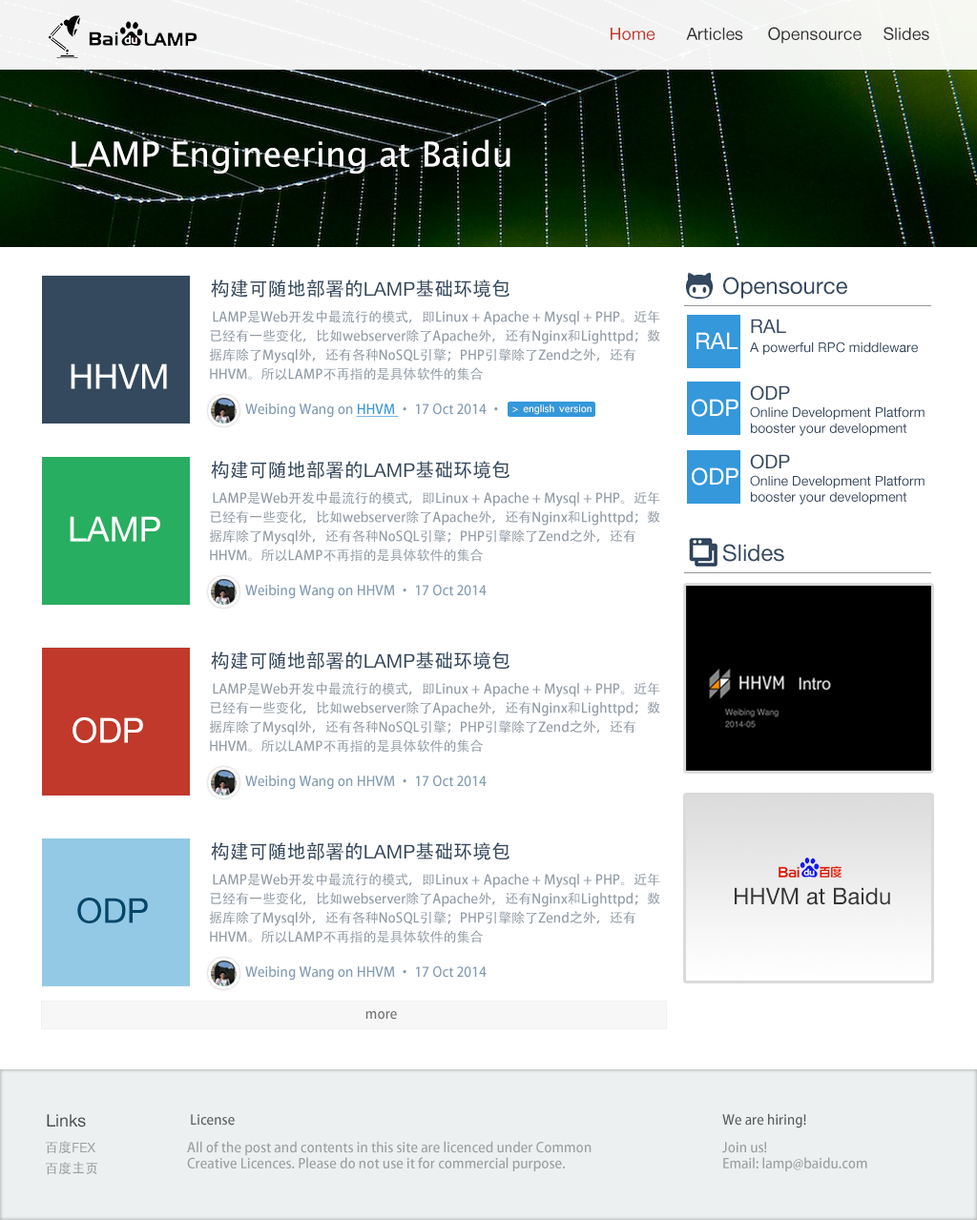
<style>
.page{position:relative;width:977px;height:1220px;background:#ffffff}
.page>*{position:absolute;margin:0}
.t1{font:17.2px "HelveticaNeue";color:#c0392b}
.t2{font:17.2px "HelveticaNeue";color:#313131}
.t3{font:34.4px "LucidaGrande";color:#ffffff}
.t4{font:19.1px "AdobeHeitiStd-Regular";color:#34495e}
.t5{font:19.1px "HelveticaNeue";color:#34495e}
.t6{font:22.9px "HelveticaNeue";color:#344860}
.t7{font:13.4px/19.1px "AdobeHeitiStd-Regular";color:#929ca6}
.t8{font:19.1px "HelveticaNeue";color:#344860}
.t9{font:22.9px "HelveticaNeue";color:#ffffff}
.t10{font:13.4px "HelveticaNeue";color:#344860}
.t11{font:34.4px "HelveticaNeue";color:#ffffff}
.t12{font:13.4px "AdobeHeitiStd-Regular";color:#839cb5}
.t13{font:13.4px "AdobeHeitiStd-Regular";color:#3498db;text-decoration:underline}
.t14{font:13.4px "AppleSymbols";color:#ffffff}
.t15{font:22.9px "HelveticaNeue";color:#363636}
.t16{font:34.4px "HelveticaNeue";color:#004669}
.t17{font:13.4px "AdobeHeitiStd-Regular";color:#727272}
.t18{font:17.2px "HelveticaNeue";color:#474747}
.t19{font:13.4px "AdobeHeitiStd-Regular";color:#5e5e5e}
.t20{font:13.4px "HelveticaNeue";color:#9f9f9f}
.t21{font:13.4px "AdobeHeitiStd-Regular";color:#9f9f9f}
</style>
<div class="page">
<p class="t1" style="left:611px;top:28px;width:45px;height:12px">Home</p>
<p class="t2" style="left:686px;top:28px;width:57px;height:12px">Articles</p>
<p class="t2" style="left:768px;top:27px;width:94px;height:17px">Opensource</p>
<p class="t2" style="left:884px;top:27px;width:45px;height:13px">Slides</p>
<p class="t3" style="left:72px;top:139px;width:438px;height:35px">LAMP Engineering at Baidu</p>
<p class="t4" style="left:211px;top:280px;width:299px;height:18px">构建可随地部署的<span class="t5">LAMP</span>基础环境包</p>
<p class="t6" style="left:723px;top:277px;width:124px;height:22px">Opensource</p>
<p class="t7" style="left:209px;top:310px;width:451px;height:71px">LAMP是Web开发中最流行的模式，即Linux + Apache + Mysql + PHP。近年已经有一些变化，比如webserver除了Apache外，还有Nginx和Lighttpd；数据库除了Mysql外，还有各种NoSQL引擎；PHP引擎除了Zend之外，还有HHVM。所以LAMP不再指的是具体软件的集合</p>
<p class="t8" style="left:751px;top:319px;width:35px;height:14px">RAL</p>
<p class="t9" style="left:697px;top:332px;width:42px;height:17px">RAL</p>
<p class="t10" style="left:750px;top:342px;width:168px;height:13px">A powerful RPC middleware</p>
<p class="t11" style="left:71px;top:364px;width:96px;height:25px">HHVM</p>
<p class="t8" style="left:750px;top:385px;width:40px;height:16px">ODP</p>
<p class="t9" style="left:692px;top:399px;width:47px;height:18px">ODP</p>
<p class="t12" style="left:245px;top:403px;width:253px;height:15px">Weibing Wang on <span class="t13">HHVM </span>· 17 Oct 2014 ·</p>
<p class="t14" style="left:512px;top:405px;width:80px;height:10px">&gt; english version</p>
<p class="t10" style="left:750px;top:406px;width:175px;height:30px">Online Development Platform<br>booster your development</p>
<p class="t4" style="left:211px;top:461px;width:299px;height:18px">构建可随地部署的<span class="t5">LAMP</span>基础环境包</p>
<p class="t8" style="left:750px;top:454px;width:40px;height:15px">ODP</p>
<p class="t9" style="left:692px;top:468px;width:47px;height:18px">ODP</p>
<p class="t10" style="left:750px;top:475px;width:175px;height:30px">Online Development Platform<br>booster your development</p>
<p class="t7" style="left:209px;top:491px;width:451px;height:71px">LAMP是Web开发中最流行的模式，即Linux + Apache + Mysql + PHP。近年已经有一些变化，比如webserver除了Apache外，还有Nginx和Lighttpd；数据库除了Mysql外，还有各种NoSQL引擎；PHP引擎除了Zend之外，还有HHVM。所以LAMP不再指的是具体软件的集合</p>
<p class="t11" style="left:70px;top:516px;width:90px;height:26px">LAMP</p>
<p class="t6" style="left:722px;top:544px;width:62px;height:18px">Slides</p>
<p class="t12" style="left:245px;top:584px;width:242px;height:15px">Weibing Wang on HHVM · 17 Oct 2014</p>
<p class="t4" style="left:211px;top:652px;width:299px;height:18px">构建可随地部署的<span class="t5">LAMP</span>基础环境包</p>
<p class="t7" style="left:209px;top:682px;width:451px;height:71px">LAMP是Web开发中最流行的模式，即Linux + Apache + Mysql + PHP。近年已经有一些变化，比如webserver除了Apache外，还有Nginx和Lighttpd；数据库除了Mysql外，还有各种NoSQL引擎；PHP引擎除了Zend之外，还有HHVM。所以LAMP不再指的是具体软件的集合</p>
<p class="t11" style="left:73px;top:718px;width:70px;height:25px">ODP</p>
<p class="t12" style="left:245px;top:775px;width:242px;height:15px">Weibing Wang on HHVM · 17 Oct 2014</p>
<p class="t4" style="left:211px;top:843px;width:299px;height:18px">构建可随地部署的<span class="t5">LAMP</span>基础环境包</p>
<p class="t7" style="left:209px;top:873px;width:451px;height:71px">LAMP是Web开发中最流行的模式，即Linux + Apache + Mysql + PHP。近年已经有一些变化，比如webserver除了Apache外，还有Nginx和Lighttpd；数据库除了Mysql外，还有各种NoSQL引擎；PHP引擎除了Zend之外，还有HHVM。所以LAMP不再指的是具体软件的集合</p>
<p class="t15" style="left:735px;top:887px;width:155px;height:19px">HHVM at Baidu</p>
<p class="t16" style="left:77px;top:898px;width:71px;height:26px">ODP</p>
<p class="t12" style="left:245px;top:966px;width:242px;height:15px">Weibing Wang on HHVM · 17 Oct 2014</p>
<p class="t17" style="left:365px;top:1011px;width:32px;height:9px">more</p>
<p class="t18" style="left:47px;top:1114px;width:39px;height:14px">Links</p>
<p class="t19" style="left:191px;top:1114px;width:44px;height:12px">License</p>
<p class="t19" style="left:722px;top:1114px;width:84px;height:15px">We are hiring!</p>
<p class="t20" style="left:46px;top:1141px;width:49px;height:14px"><span class="t21">百度</span>FEX</p>
<p class="t21" style="left:187px;top:1141px;width:405px;height:31px">All of the post and contents in this site are licenced under Common<br>Creative Licences. Please do not use it for commercial purpose.</p>
<p class="t21" style="left:722px;top:1142px;width:145px;height:30px">Join us!<br>Email: lamp@baidu.com</p>
<p class="t21" style="left:46px;top:1162px;width:51px;height:14px">百度主页</p>
</div>
